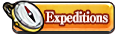
<style>
.page{position:relative;width:115px;height:34px}
.page>*{position:absolute;margin:0}
.t1{font:14px "RyuminPro-ExBold";letter-spacing:-0.08em;color:#fff4ee;font-weight:bold;scale:0.9 1}
</style>
<div class="page">
<p class="t1" style="left:45px;top:11px;width:63px;height:14px">Expeditions</p>
</div>
